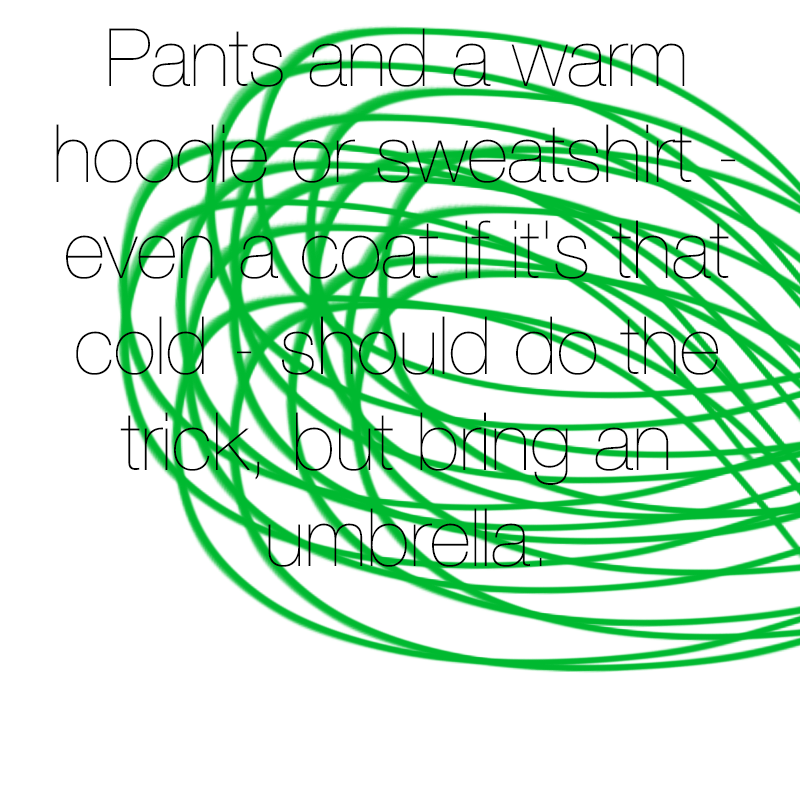
<style>
.page{position:relative;width:800px;height:800px;background:#ffffff}
.page>*{position:absolute;margin:0}
.t1{font:80px "HelveticaNeue-UltraLight";color:#000000}
</style>
<div class="page">
<p class="t1" style="left:56px;top:28px;width:680px;height:539px;text-align:center">Pants and a warm <br>hoodie or sweatshirt - <br>even a coat if it's that <br>cold - should do the <br>trick, but bring an <br>umbrella.</p>
</div>
